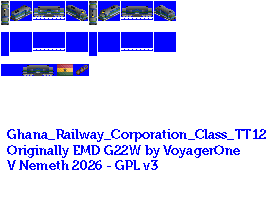
<style>
.page{position:relative;width:279px;height:200px;background:#ffffff}
.page>*{position:absolute;margin:0}
.t1{font:13px "Museo700-Regular";color:#0000ff}
</style>
<div class="page">
<p class="t1" style="left:7px;top:129px;width:259px;height:41px">Ghana_Railway_Corporation_Class_TT12<br>Originally EMD G22W by VoyagerOne<br>V Nemeth 2026 - GPL v3</p>
</div>
